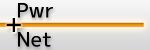
<style>
.page{position:relative;width:150px;height:50px}
.page>*{position:absolute;margin:0}
.t1{font:20px/29px "mplus-2p-medium";color:#000000}
.t2{font:24px "mplus-2p-medium";color:#000000}
</style>
<div class="page">
<p class="t1" style="left:18px;top:3px;width:35px;height:44px">Pwr<br>Net</p>
<p class="t2" style="left:6px;top:18px;width:15px;height:14px">+</p>
</div>
